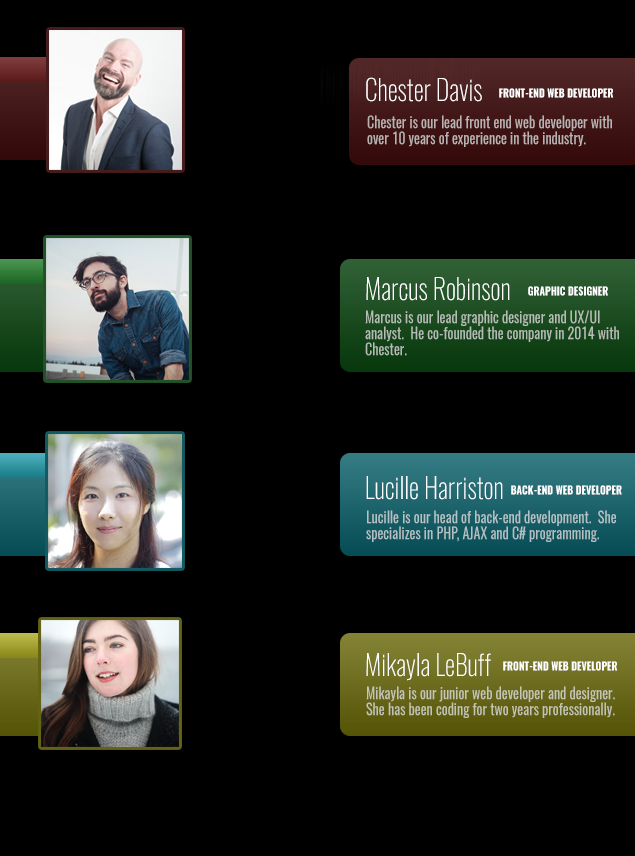
<style>
.page{position:relative;width:635px;height:856px;background:#000000}
.page>*{position:absolute;margin:0}
.t1{font:28.6px "Oswald-ExtraLight";color:#ffffff;scale:0.91 1}
.t2{font:11px "Oswald-Bold";color:#ffffff;scale:0.91 1}
.t3{font:15.4px/16px "Oswald-Regular";color:#bbb2b2;scale:0.91 1}
.t4{font:15.4px/16px "Oswald-Regular";color:#b3bcb3;scale:0.91 1}
.t5{font:15.4px/16px "Oswald-Regular";color:#b3c2c5;scale:0.91 1}
.t6{font:15.4px/16px "Oswald-Regular";color:#c5c5b3;scale:0.91 1}
</style>
<div class="page">
<p class="t1" style="left:366px;top:77px;width:116px;height:25px">Chester Davis</p>
<p class="t2" style="left:499px;top:88px;width:115px;height:10px">FRONT-END WEB DEVELOPER</p>
<p class="t3" style="left:367px;top:115px;width:245px;height:32px">Chester is our lead front end web developer with<br>over 10 years of experience in the industry.</p>
<p class="t1" style="left:366px;top:277px;width:144px;height:24px">Marcus Robinson</p>
<p class="t2" style="left:528px;top:286px;width:80px;height:10px">GRAPHIC DESIGNER</p>
<p class="t4" style="left:365px;top:310px;width:254px;height:46px">Marcus is our lead graphic designer and UX/UI<br>analyst.  He co-founded the company in 2014 with <br>Chester.</p>
<p class="t1" style="left:366px;top:476px;width:137px;height:24px">Lucille Harriston</p>
<p class="t2" style="left:511px;top:485px;width:111px;height:10px">BACK-END WEB DEVELOPER</p>
<p class="t5" style="left:366px;top:510px;width:250px;height:32px">Lucille is our head of back-end development.  She specializes in PHP, AJAX and C# programming.</p>
<p class="t1" style="left:366px;top:653px;width:125px;height:28px">Mikayla LeBuff</p>
<p class="t2" style="left:503px;top:661px;width:115px;height:10px">FRONT-END WEB DEVELOPER</p>
<p class="t6" style="left:366px;top:686px;width:249px;height:32px">Mikayla is our junior web developer and designer.  She has been coding for two years professionally.</p>
</div>
